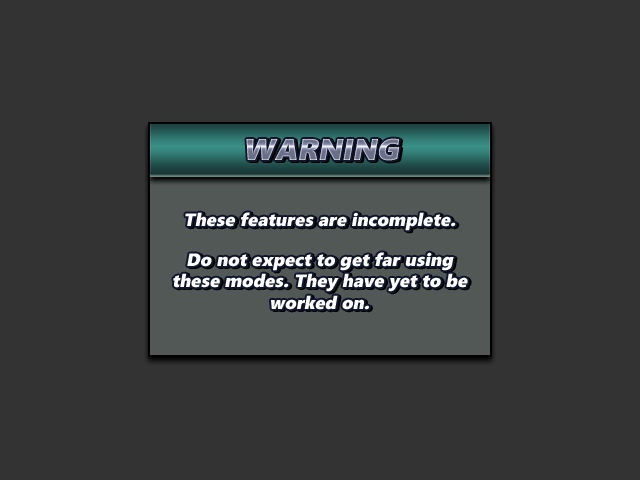
<style>
.page{position:relative;width:640px;height:480px;background:#333333}
.page>*{position:absolute;margin:0}
.t1{font:30px "SegoeUIBlack";font-style:italic}
.t2{font:18px "SegoeUIBlack";color:#ffffff;font-style:italic}
</style>
<div class="page">
<p class="t1" style="left:246px;top:138px;width:154px;height:23px">WARNING</p>
<p class="t2" style="left:185px;top:212px;width:271px;height:19px">These features are incomplete.</p>
<p class="t2" style="left:173px;top:252px;width:295px;height:58px;text-align:center">Do not expect to get far using<br>these modes. They have yet to be<br>worked on.</p>
</div>
